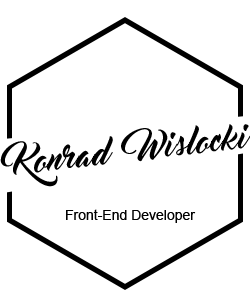
<style>
.page{position:relative;width:250px;height:300px;background:#ffffff}
.page>*{position:absolute;margin:0}
.t1{font:32px "MasterOfBreak";color:#000000}
.t2{font:14px "ArialMT";color:#000000}
</style>
<div class="page">
<p class="t1" style="left:0px;top:124px;width:251px;height:63px;rotate:-7deg">Konrad   Wislocki</p>
<p class="t2" style="left:66px;top:209px;width:130px;height:14px">Front-End Developer</p>
</div>
